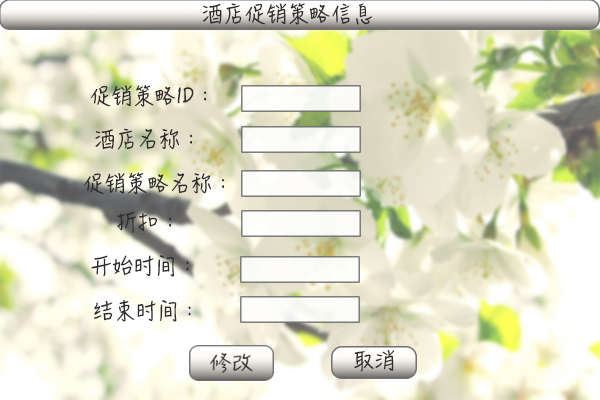
<style>
.page{position:relative;width:600px;height:400px}
.page>*{position:absolute;margin:0}
.t1{font:21px "HanziPenSC-W5";letter-spacing:-0.005em;color:#2f2d2d;text-transform:uppercase}
</style>
<div class="page">
<p class="t1" style="left:203px;top:3px;width:169px;height:22px">酒店促销策略信息</p>
<p class="t1" style="left:91px;top:85px;width:116px;height:22px">促销策略ID：</p>
<p class="t1" style="left:95px;top:128px;width:98px;height:22px">酒店名称：</p>
<p class="t1" style="left:84px;top:172px;width:141px;height:23px">促销策略名称：</p>
<p class="t1" style="left:117px;top:211px;width:55px;height:22px">折扣：</p>
<p class="t1" style="left:91px;top:255px;width:98px;height:22px">开始时间：</p>
<p class="t1" style="left:94px;top:299px;width:97px;height:23px">结束时间：</p>
</div>
